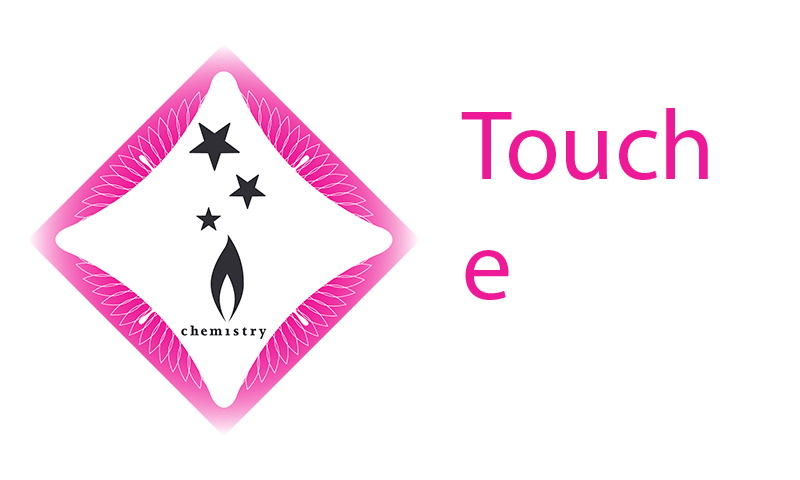
<style>
.page{position:relative;width:800px;height:480px;background:#ffffff}
.page>*{position:absolute;margin:0}
.t1{font:100px "MyriadPro-Regular";color:#ed1996}
</style>
<div class="page">
<p class="t1" style="left:461px;top:108px;width:247px;height:192px">Touch <br>e</p>
</div>
